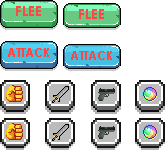
<style>
.page{position:relative;width:165px;height:150px;background:#ffffff}
.page>*{position:absolute;margin:0}
.t1{font:14px "CenturyGothic-Bold";color:#ff4747}
.t2{font:12px "CenturyGothic-Bold";color:#ff4545}
</style>
<div class="page">
<p class="t1" style="left:16px;top:6px;width:25px;height:10px">FLEE</p>
<p class="t1" style="left:79px;top:9px;width:25px;height:10px">FLEE</p>
<p class="t2" style="left:8px;top:48px;width:41px;height:9px">ATTACK</p>
<p class="t2" style="left:71px;top:51px;width:41px;height:9px">ATTACK</p>
</div>
